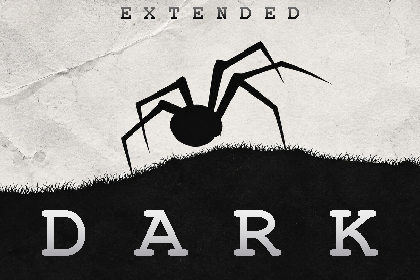
<style>
.page{position:relative;width:420px;height:280px}
.page>*{position:absolute;margin:0}
.t1{font:20px "CourierNewPS-BoldMT"}
.t2{font:80px "CourierNewPS-BoldMT"}
</style>
<div class="page">
<p class="t1" style="left:121px;top:7px;width:178px;height:12px">E X T E N D E D</p>
<p class="t2" style="left:42px;top:210px;width:336px;height:46px">D A R K</p>
</div>
